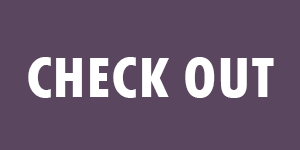
<style>
.page{position:relative;width:300px;height:150px;background:#5b4660}
.page>*{position:absolute;margin:0}
.t1{font:60px "TwCenMT-CondensedExtraBold";color:#ffffff}
</style>
<div class="page">
<p class="t1" style="left:28px;top:57px;width:246px;height:41px">CHECK OUT</p>
</div>
